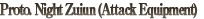
<style>
.page{position:relative;width:204px;height:19px;background:#ffffff}
.page>*{position:absolute;margin:0}
.t1{font:16px "RyuminPro-ExBold";letter-spacing:-0.11em;color:#4a3f32;font-weight:bold;scale:0.8 1}
</style>
<div class="page">
<p class="t1" style="left:0px;top:3px;width:198px;height:16px">Proto. Night Zuiun (Attack Equipment)</p>
</div>
